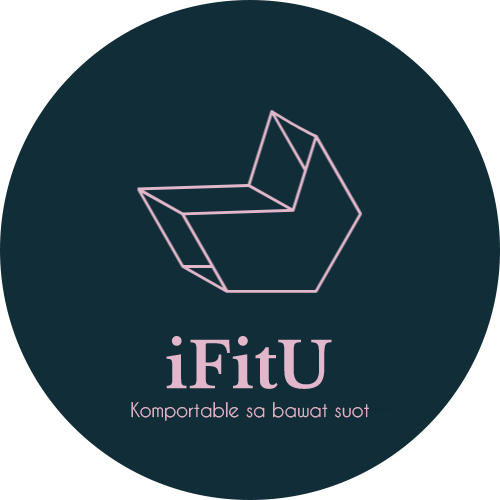
<style>
.page{position:relative;width:500px;height:500px;background:#112d37}
.page>*{position:absolute;margin:0}
.t1{font:18.8px "CaviarDreams";color:#e3b7cb}
</style>
<div class="page">
<p class="t1" style="left:131px;top:402px;width:238px;height:19px">Komportable sa bawat suot</p>
</div>
